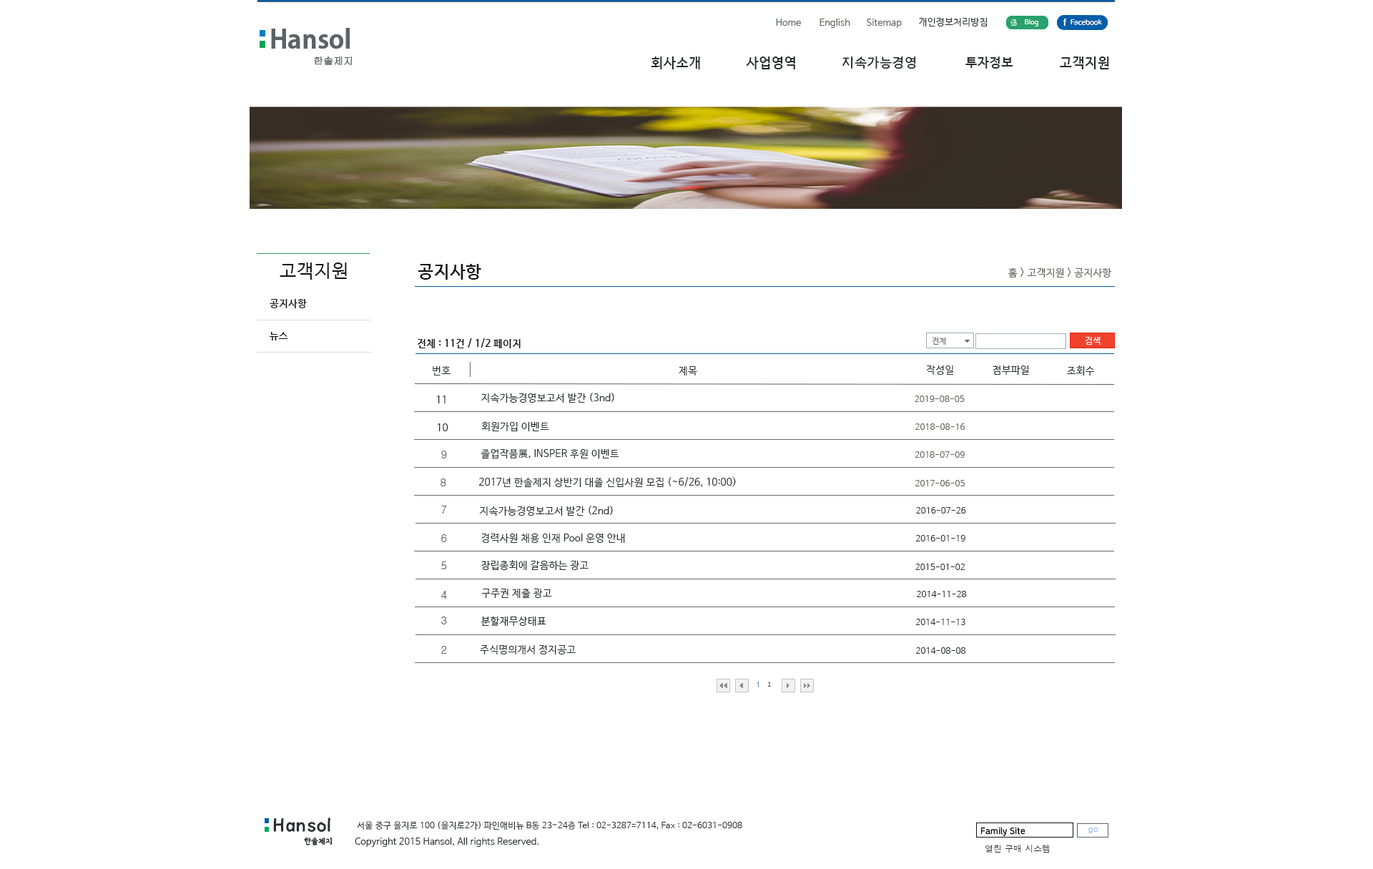
<style>
.page{position:relative;width:1373px;height:869px;background:#ffffff}
.page>*{position:absolute;margin:0}
.t1{font:9.3px "HanSantteutDotumRegular";color:#2b2e30}
.t2{font:25.7px "AdobeGothicStd-Bold";color:#5b6366}
.t3{font:9.3px "HanSantteutDotumRegular";color:#5b6366}
.t4{font:9.3px "HanSantteutDotumRegular";color:#60615c}
.t5{font:9.3px "FrenchScriptMT";color:#ffffff}
.t6{font:7.1px "HanSantteutDotumRegular";color:#ffffff}
.t7{font:10px "Calibri-Bold";color:#ffffff}
.t8{font:7.1px "HancomGothicBold";color:#f2f2f2}
.t9{font:10px "Gulim";color:#5b6366}
.t10{font:13.6px "HancomGothicBold";color:#2b2e30}
.t11{font:13.6px "MapoPeacefull";color:#2b2e30}
.t12{font:12.9px "HancomGothicBold";color:#2b2e30}
.t13{font:18.6px "HanSantteutDotumRegular";color:#111111}
.t14{font:17.2px "HanSantteutDotumBold";color:#111111}
.t15{font:10px "HanSantteutDotumRegular";color:#60615c}
.t16{font:10px "HanSantteutDotumBold";color:#111111}
.t17{font:7.9px "HanSantteutDotumRegular";color:#696969}
.t18{font:8.6px "HanSantteutDotumRegular";color:#ffffff}
.t19{font:10px "HanSantteutDotumRegular";color:#2b2e30}
.t20{font:8.6px "HanSantteutDotumRegular";color:#60615c}
.t21{font:10.7px "Gulim";color:#60615c}
.t22{font:8.6px "HanSantteutDotumRegular";color:#2b2e30}
.t23{font:12.3px "Candara";color:#6b91e0}
.t24{font:9.3px "Candara";color:#60615c}
.t25{font:20px "MapoBackpacking";color:#2b2e30}
.t26{font:8.6px "HancomGothicRegular";color:#2b2e30}
.t27{font:8.6px "MapoPeacefull";color:#111111}
.t28{font:8.6px "Dotum";color:#97b5e7}
.t29{font:8.6px "MapoBackpacking";color:#2b2e30}
.t30{font:8.6px "Dotum";color:#2b2e30}
</style>
<div class="page">
<p class="t1" style="left:919px;top:18px;width:68px;height:8px">개인정보처리방침</p>
<p class="t2" style="left:271px;top:28px;width:79px;height:21px">Hansol</p>
<p class="t2" style="left:271px;top:28px;width:79px;height:21px">Hansol</p>
<p class="t3" style="left:776px;top:19px;width:25px;height:7px">Home</p>
<p class="t4" style="left:819px;top:19px;width:31px;height:9px">English</p>
<p class="t4" style="left:867px;top:19px;width:35px;height:9px">Sitemap</p>
<p class="t5" style="left:1010px;top:19px;width:7px;height:7px">B</p>
<p class="t5" style="left:1010px;top:19px;width:7px;height:7px">B</p>
<p class="t6" style="left:1025px;top:19px;width:13px;height:7px">Blog</p>
<p class="t6" style="left:1025px;top:19px;width:13px;height:7px">Blog</p>
<p class="t7" style="left:1062px;top:19px;width:5px;height:7px">f</p>
<p class="t7" style="left:1062px;top:19px;width:5px;height:7px">f</p>
<p class="t8" style="left:1070px;top:19px;width:32px;height:6px">Facebook</p>
<p class="t8" style="left:1070px;top:19px;width:32px;height:6px">Facebook</p>
<p class="t9" style="left:314px;top:56px;width:38px;height:9px">한솔제지</p>
<p class="t9" style="left:314px;top:56px;width:38px;height:9px">한솔제지</p>
<p class="t10" style="left:651px;top:56px;width:49px;height:13px">회사소개</p>
<p class="t10" style="left:746px;top:56px;width:49px;height:13px">사업영역</p>
<p class="t11" style="left:842px;top:56px;width:74px;height:13px">지속가능경영</p>
<p class="t12" style="left:965px;top:56px;width:48px;height:13px">투자정보</p>
<p class="t10" style="left:1060px;top:56px;width:49px;height:13px">고객지원</p>
<p class="t13" style="left:280px;top:262px;width:67px;height:18px">고객지원</p>
<p class="t14" style="left:418px;top:264px;width:63px;height:16px">공지사항</p>
<p class="t15" style="left:1008px;top:267px;width:103px;height:10px">홈 &gt; 고객지원 &gt; 공지사항</p>
<p class="t16" style="left:270px;top:299px;width:37px;height:9px">공지사항</p>
<p class="t16" style="left:269px;top:332px;width:19px;height:8px">뉴스</p>
<p class="t16" style="left:417px;top:338px;width:103px;height:10px">전체 : 11건 / 1/2 페이지</p>
<p class="t17" style="left:932px;top:337px;width:14px;height:8px">전체</p>
<p class="t18" style="left:1085px;top:337px;width:15px;height:8px">검색</p>
<p class="t19" style="left:926px;top:365px;width:27px;height:10px">작성일</p>
<p class="t19" style="left:992px;top:365px;width:37px;height:10px">첨부파일</p>
<p class="t19" style="left:1067px;top:365px;width:28px;height:10px">조회수</p>
<p class="t19" style="left:433px;top:366px;width:17px;height:9px">번호</p>
<p class="t19" style="left:678px;top:366px;width:19px;height:9px">제목</p>
<p class="t19" style="left:437px;top:395px;width:8px;height:8px">11</p>
<p class="t19" style="left:480px;top:393px;width:134px;height:10px">지속가능경영보고서 발간 (3nd)</p>
<p class="t20" style="left:914px;top:395px;width:50px;height:7px">2019-08-05</p>
<p class="t19" style="left:438px;top:423px;width:10px;height:8px">10</p>
<p class="t19" style="left:481px;top:421px;width:68px;height:10px">회원가입 이벤트</p>
<p class="t20" style="left:915px;top:423px;width:50px;height:7px">2018-08-16</p>
<p class="t19" style="left:480px;top:449px;width:139px;height:10px">졸업작품展, INSPER 후원 이벤트</p>
<p class="t21" style="left:441px;top:450px;width:6px;height:8px">9</p>
<p class="t20" style="left:914px;top:451px;width:50px;height:7px">2018-07-09</p>
<p class="t21" style="left:440px;top:478px;width:6px;height:8px">8</p>
<p class="t19" style="left:478px;top:477px;width:258px;height:11px">2017년 한솔제지 상반기 대졸 신입사원 모집 (~6/26, 10:00)</p>
<p class="t20" style="left:915px;top:480px;width:50px;height:6px">2017-06-05</p>
<p class="t21" style="left:441px;top:505px;width:6px;height:8px">7</p>
<p class="t19" style="left:479px;top:505px;width:134px;height:10px">지속가능경영보고서 발간 (2nd)</p>
<p class="t22" style="left:916px;top:507px;width:50px;height:6px">2016-07-26</p>
<p class="t19" style="left:481px;top:533px;width:144px;height:10px">경력사원 채용 인재 Pool 운영 안내</p>
<p class="t21" style="left:441px;top:534px;width:6px;height:8px">6</p>
<p class="t22" style="left:915px;top:535px;width:50px;height:6px">2016-01-19</p>
<p class="t21" style="left:441px;top:561px;width:6px;height:8px">5</p>
<p class="t19" style="left:481px;top:560px;width:107px;height:11px">창립총회에 갈음하는 광고</p>
<p class="t22" style="left:915px;top:563px;width:50px;height:7px">2015-01-02</p>
<p class="t21" style="left:441px;top:591px;width:6px;height:7px">4</p>
<p class="t19" style="left:481px;top:588px;width:71px;height:10px">구주권 제출 광고</p>
<p class="t22" style="left:917px;top:591px;width:50px;height:6px">2014-11-28</p>
<p class="t21" style="left:441px;top:616px;width:6px;height:8px">3</p>
<p class="t19" style="left:480px;top:616px;width:66px;height:10px">분할재무상태표</p>
<p class="t22" style="left:915px;top:618px;width:50px;height:7px">2014-11-13</p>
<p class="t21" style="left:441px;top:646px;width:6px;height:7px">2</p>
<p class="t19" style="left:480px;top:645px;width:96px;height:9px">주식명의개서 정지공고</p>
<p class="t22" style="left:916px;top:647px;width:50px;height:6px">2014-08-08</p>
<p class="t23" style="left:756px;top:681px;width:3px;height:6px">1</p>
<p class="t24" style="left:768px;top:682px;width:3px;height:4px">2</p>
<p class="t25" style="left:273px;top:817px;width:57px;height:14px">Hansol</p>
<p class="t26" style="left:357px;top:821px;width:385px;height:8px">서울 중구 을지로 100 (을지로2가) 파인애비뉴 B동 23~24층 Tel : 02-3287=7114, Fax : 02-6031-0908</p>
<p class="t27" style="left:980px;top:826px;width:45px;height:10px">Family Site</p>
<p class="t28" style="left:1088px;top:827px;width:10px;height:6px">go</p>
<p class="t29" style="left:304px;top:836px;width:28px;height:9px">한솔제지</p>
<p class="t1" style="left:355px;top:837px;width:183px;height:10px">Copyright 2015 Hansol, All rights Reserved<span class="t26">.</span></p>
<p class="t30" style="left:985px;top:844px;width:64px;height:9px">열린 구매 시스템</p>
</div>
